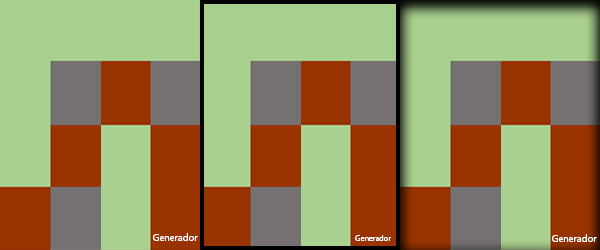
<style>
.page{position:relative;width:600px;height:250px;background:#a9d08e}
.page>*{position:absolute;margin:0}
.t1{font:10px "MyriadHebrew-Regular";color:#ffffff}
.t2{font:8px "MyriadHebrew-Regular";color:#ffffff}
</style>
<div class="page">
<p class="t1" style="left:153px;top:233px;width:45px;height:8px">Generador</p>
<p class="t2" style="left:355px;top:235px;width:37px;height:6px">Generador</p>
<p class="t1" style="left:552px;top:234px;width:45px;height:8px">Generador</p>
</div>
